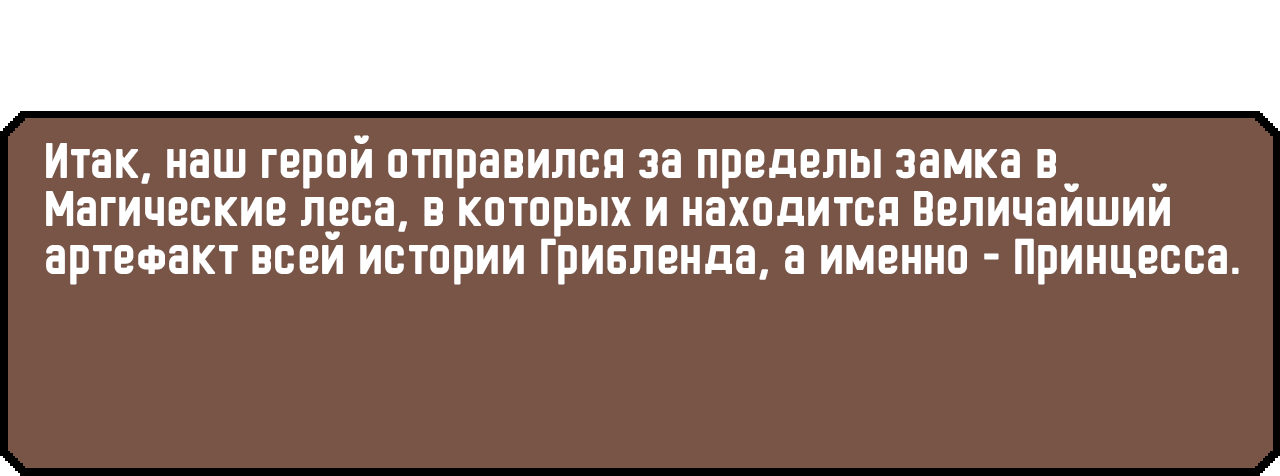
<style>
.page{position:relative;width:1280px;height:476px;background:#795548}
.page>*{position:absolute;margin:0}
.t1{font:48px/48px "HermanoMayor";color:#ffffff}
</style>
<div class="page">
<p class="t1" style="left:46px;top:135px;width:1193px;height:150px">Итак, наш герой отправился за пределы замка в Магические леса, в которых и находится Величайший артефакт всей истории Грибленда, а именно - Принцесса.</p>
</div>
